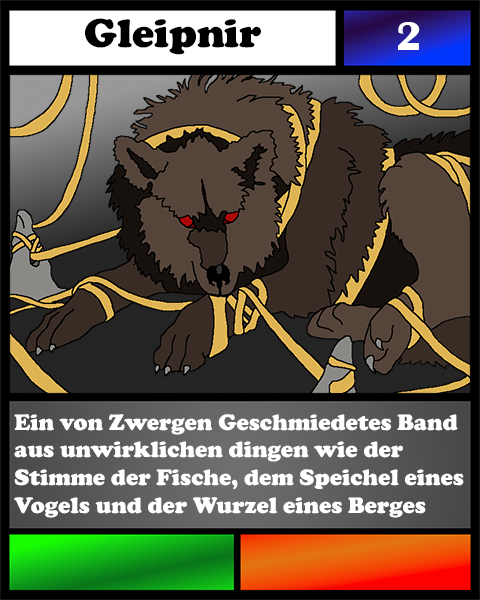
<style>
.page{position:relative;width:480px;height:600px}
.page>*{position:absolute;margin:0}
.t1{font:41.7px "CooperBlack";color:#000000}
.t2{font:41.7px "BritannicBold";color:#ffffff}
.t3{font:23.1px "CooperBlack";color:#ffffff}
</style>
<div class="page">
<p class="t1" style="left:85px;top:18px;width:176px;height:37px">Gleipnir</p>
<p class="t2" style="left:398px;top:22px;width:22px;height:28px">2</p>
<p class="t3" style="left:14px;top:414px;width:450px;height:104px">Ein von Zwergen Geschmiedetes Band<br>aus unwirklichen dingen wie der <br>Stimme der Fische, dem Speichel eines<br>Vogels und der Wurzel eines Berges<br><br>Vogel</p>
</div>
